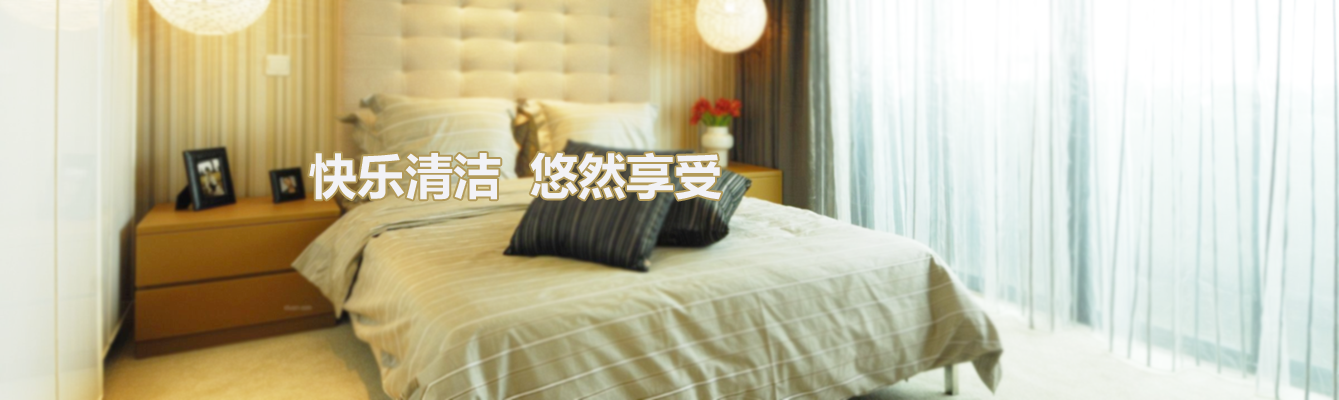
<style>
.page{position:relative;width:1339px;height:400px}
.page>*{position:absolute;margin:0}
.t1{font:48px "MicrosoftYaHei-Bold";color:#f2f2f6}
</style>
<div class="page">
<p class="t1" style="left:309px;top:152px;width:413px;height:48px">快乐清洁  悠然享受</p>
</div>
